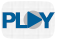
<style>
.page{position:relative;width:61px;height:40px}
.page>*{position:absolute;margin:0}
.t1{font:22.1px "HelveticaNeue-Bold";letter-spacing:-0.1em;color:#005e98;font-weight:bold}
.t2{font:22.1px "HelveticaNeue-Bold";letter-spacing:-0.44em;color:#005e98;font-weight:bold}
.t3{font:22.1px "HelveticaNeue-Bold";color:#005e98;font-weight:bold}
</style>
<div class="page">
<p class="t1" style="left:2px;top:12px;width:53px;height:17px">P<span class="t2">L</span><span class="t3">   Y</span></p>
</div>
